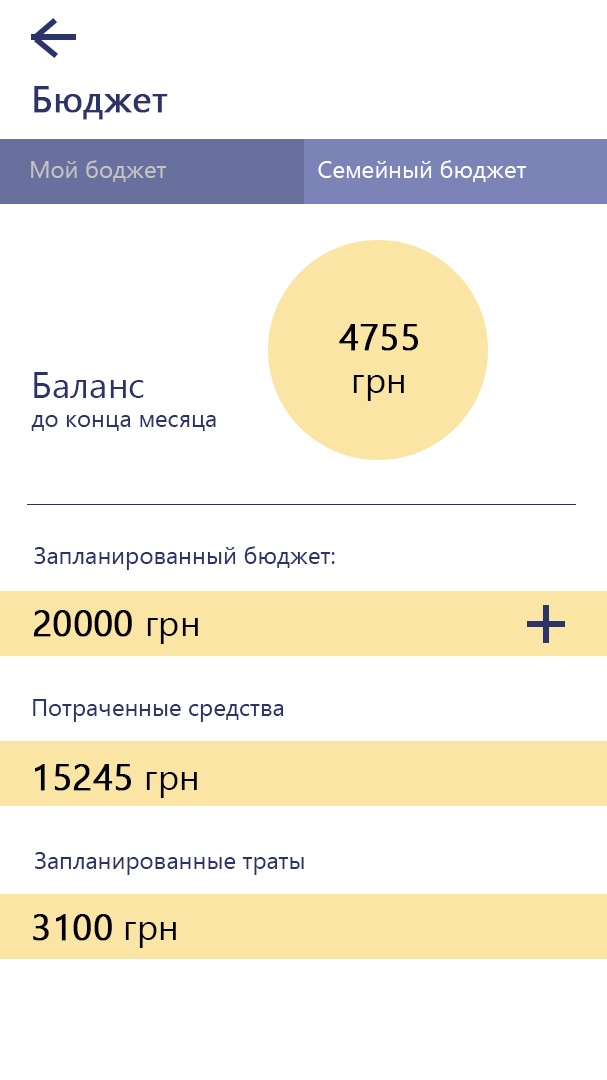
<style>
.page{position:relative;width:607px;height:1080px;background:#ffffff}
.page>*{position:absolute;margin:0}
.t1{font:36px "YuGothicUI-Regular";color:#2b3368;font-weight:bold}
.t2{font:24px "YuGothicUI-Regular";color:#c3c3c5}
.t3{font:24px "YuGothicUI-Regular";color:#fbfcff}
.t4{font:36px "YuGothicUI-Regular";color:#010101;font-weight:bold}
.t5{font:36px "YuGothicUI-Regular";color:#010101}
.t6{font:24px "YuGothicUI-Regular";color:#2b3368}
.t7{font:36px "YuGothicUI-Regular";color:#2b3368}
.t8{font:36px "YuGothicUI-Regular";color:#000000;font-weight:bold}
.t9{font:36px "YuGothicUI-Regular";color:#000000}
</style>
<div class="page">
<p class="t1" style="left:34px;top:86px;width:134px;height:34px">Бюджет</p>
<p class="t2" style="left:31px;top:160px;width:136px;height:22px">Мой боджет</p>
<p class="t3" style="left:318px;top:160px;width:209px;height:22px">Семейный бюджет</p>
<p class="t4" style="left:339px;top:324px;width:79px;height:77px;text-align:center">4755<br><span class="t5">грн</span></p>
<p class="t6" style="left:31px;top:372px;width:185px;height:59px"><span class="t7">Баланс<br></span>до конца месяца</p>
<p class="t6" style="left:34px;top:546px;width:301px;height:24px">Запланированный бюджет:</p>
<p class="t8" style="left:33px;top:610px;width:165px;height:34px">20000 <span class="t9">грн</span></p>
<p class="t6" style="left:33px;top:699px;width:251px;height:23px">Потраченные средства</p>
<p class="t8" style="left:35px;top:764px;width:162px;height:34px">15245 <span class="t9">грн</span></p>
<p class="t6" style="left:35px;top:852px;width:269px;height:23px">Запланированные траты</p>
<p class="t4" style="left:33px;top:914px;width:143px;height:34px">3100<span class="t5"> грн</span></p>
</div>
